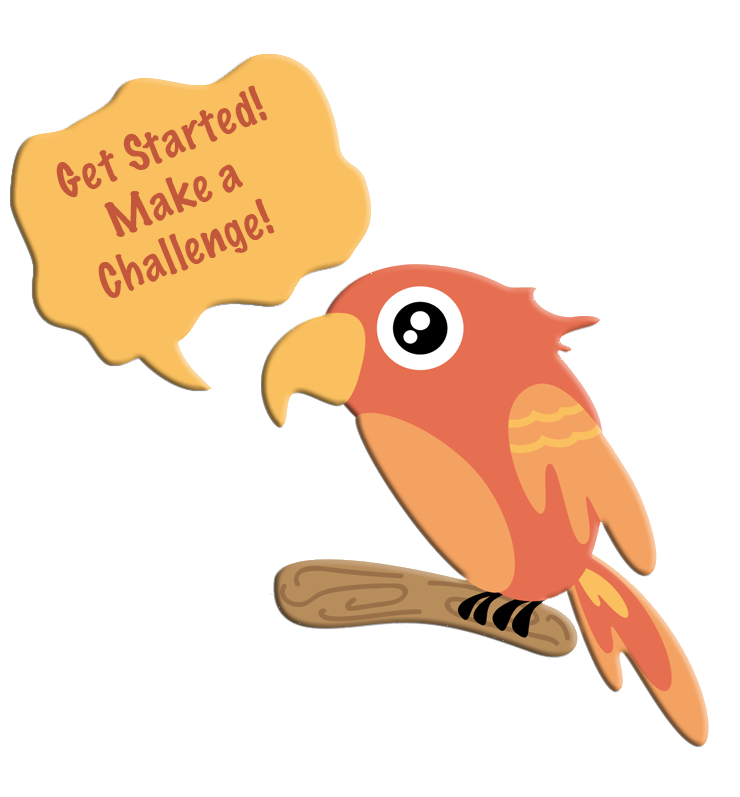
<style>
.page{position:relative;width:740px;height:797px;background:#ffffff}
.page>*{position:absolute;margin:0}
.t1{font:45px "MarkerFelt-Thin";color:#c2573c}
</style>
<div class="page">
<p class="t1" style="left:56px;top:85px;width:219px;height:213px;rotate:-22deg">Get Started! <br>             Make a <br>           Challenge!</p>
</div>
